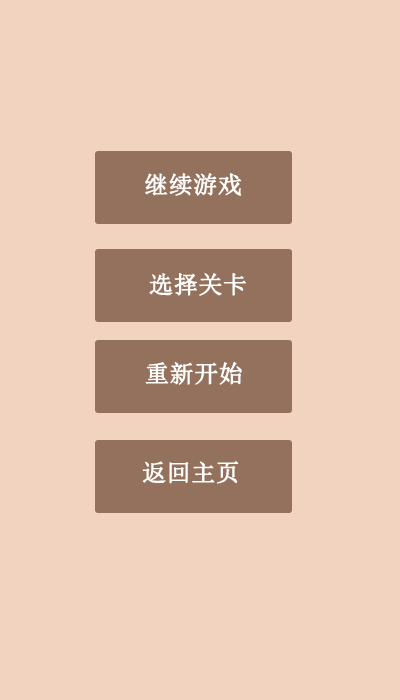
<style>
.page{position:relative;width:400px;height:700px;background:#f2d3c0}
.page>*{position:absolute;margin:0}
.t1{font:24px "SimSun";color:#ffffff;font-weight:bold}
</style>
<div class="page">
<p class="t1" style="left:145px;top:173px;width:97px;height:23px">继续游戏</p>
<p class="t1" style="left:149px;top:273px;width:97px;height:23px">选择关卡</p>
<p class="t1" style="left:145px;top:362px;width:97px;height:23px">重新开始</p>
<p class="t1" style="left:142px;top:461px;width:97px;height:23px">返回主页</p>
</div>
